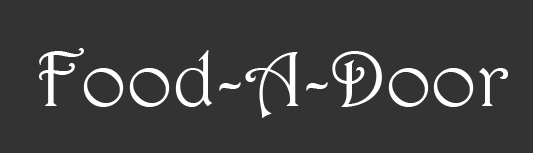
<style>
.page{position:relative;width:533px;height:153px;background:#333333}
.page>*{position:absolute;margin:0}
.t1{font:79px "Harrington";color:#ffffff}
</style>
<div class="page">
<p class="t1" style="left:39px;top:48px;width:469px;height:70px">Food-A-Door</p>
</div>
